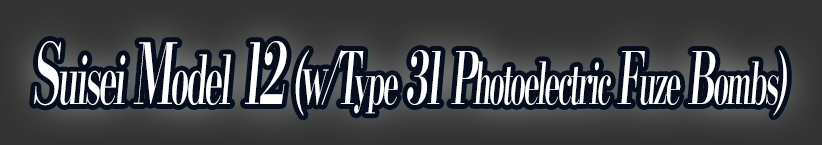
<style>
.page{position:relative;width:822px;height:145px}
.page>*{position:absolute;margin:0}
.t1{font:57.6px "KochoStd-Heavy";letter-spacing:-0.08em;color:#ffffff;font-style:italic;scale:0.5 1}
.t2{font:84px "KochoStd-Heavy";letter-spacing:-0.08em;color:#ffffff;font-style:italic;scale:0.5 1}
.t3{font:67.2px "KochoStd-Heavy";letter-spacing:-0.08em;color:#ffffff;font-style:italic;scale:0.5 1}
.t4{font:72px "KochoStd-Heavy";letter-spacing:-0.08em;color:#ffffff;font-style:italic;scale:0.5 1}
</style>
<div class="page">
<p class="t1" style="left:34px;top:41px;width:753px;height:75px"><span class="t2">S</span><span class="t3">uisei</span><span class="t2"> M</span><span class="t3">odel</span><span class="t2"> 12 </span><span class="t4">(w/T</span>ype<span class="t4"> 31 P</span>hotoelectric<span class="t4"> F</span>uze<span class="t4"> B</span>ombs<span class="t4">)</span></p>
</div>
